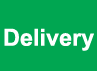
<style>
.page{position:relative;width:97px;height:71px;background:#00a651}
.page>*{position:absolute;margin:0}
.t1{font:23.5px "Arial-BoldMT";color:#ffffff}
</style>
<div class="page">
<p class="t1" style="left:4px;top:28px;width:90px;height:23px">Delivery</p>
</div>
